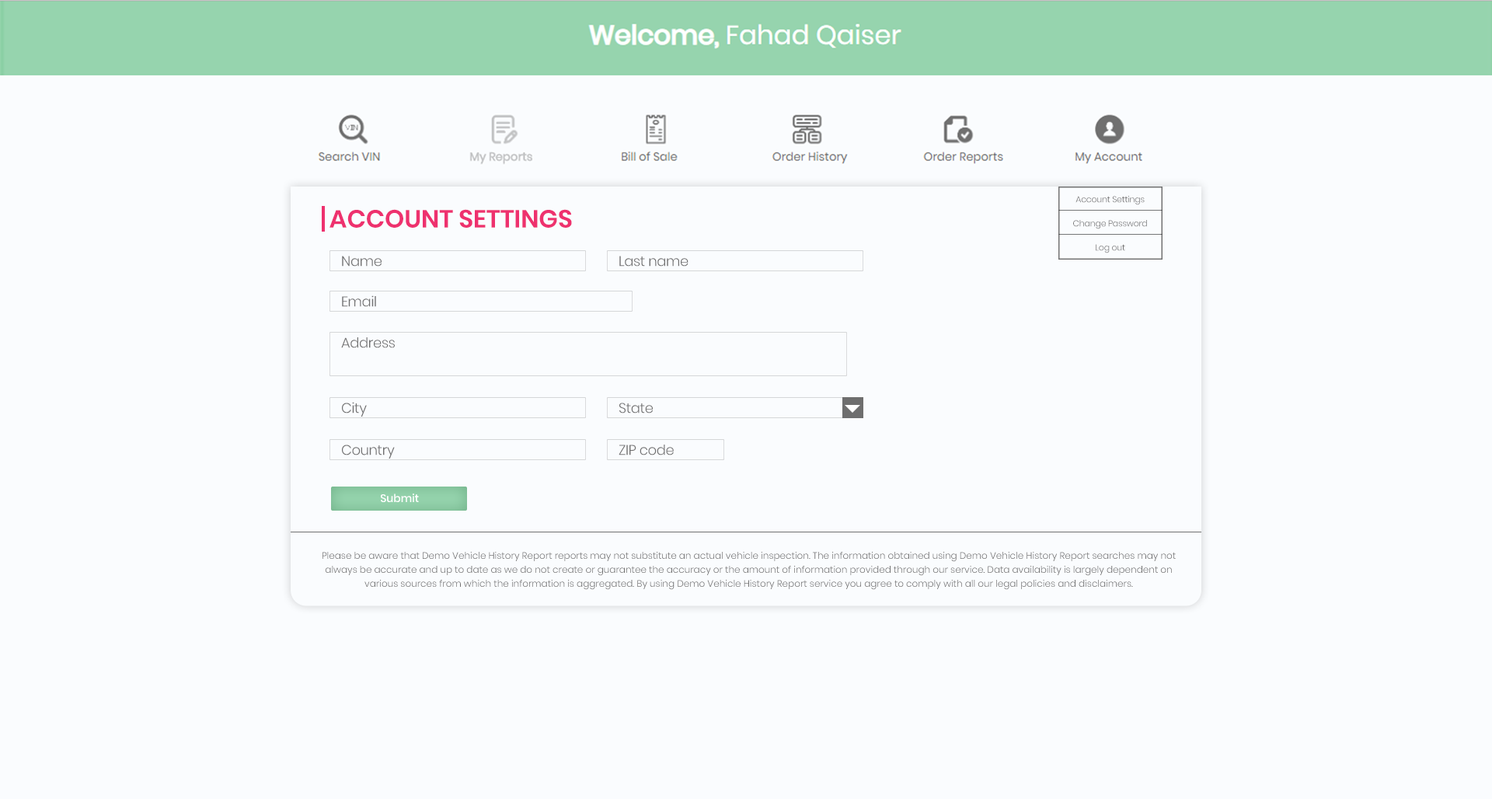
<style>
.page{position:relative;width:1492px;height:799px;background:#fafcfe}
.page>*{position:absolute;margin:0}
.t1{font:8.5px "Poppins-Light";letter-spacing:-0.02em;color:#707070}
.t2{font:24.9px "Poppins-SemiBold";color:#ee316e;text-transform:uppercase}
.t3{font:14px "Poppins-Light";letter-spacing:-0.02em;color:#707070}
.t4{font:10.9px "Poppins-Medium";color:#ffffff}
.t5{font:9.3px/14px "Poppins-Light";color:#707070}
</style>
<div class="page">
<p class="t1" style="left:1076px;top:196px;width:69px;height:9px">Account Settings</p>
<p class="t2" style="left:330px;top:209px;width:242px;height:19px">Account Settings</p>
<p class="t1" style="left:1073px;top:220px;width:74px;height:9px">Change Password</p>
<p class="t1" style="left:1096px;top:244px;width:29px;height:9px">Log out</p>
<p class="t3" style="left:342px;top:256px;width:40px;height:11px">Name</p>
<p class="t3" style="left:619px;top:256px;width:70px;height:11px">Last name</p>
<p class="t3" style="left:342px;top:295px;width:34px;height:12px">Email</p>
<p class="t3" style="left:341px;top:337px;width:54px;height:11px">Address</p>
<p class="t3" style="left:342px;top:402px;width:25px;height:15px">City</p>
<p class="t3" style="left:619px;top:403px;width:34px;height:11px">State</p>
<p class="t3" style="left:342px;top:445px;width:53px;height:14px">Country</p>
<p class="t3" style="left:619px;top:445px;width:55px;height:10px">ZIP code</p>
<p class="t4" style="left:381px;top:494px;width:38px;height:8px">Submit</p>
<p class="t5" style="left:323px;top:552px;width:853px;height:38px;text-align:center">Please be aware that Demo Vehicle History Report reports may not substitute an actual vehicle inspection. The information obtained using Demo Vehicle History Report searches may not always be accurate and up to date as we do not create or guarantee the accuracy or the amount of information provided through our service. Data availability is largely dependent on various sources from which the information is aggregated. By using Demo Vehicle History Report service you agree to comply with all our legal policies and disclaimers.</p>
</div>
